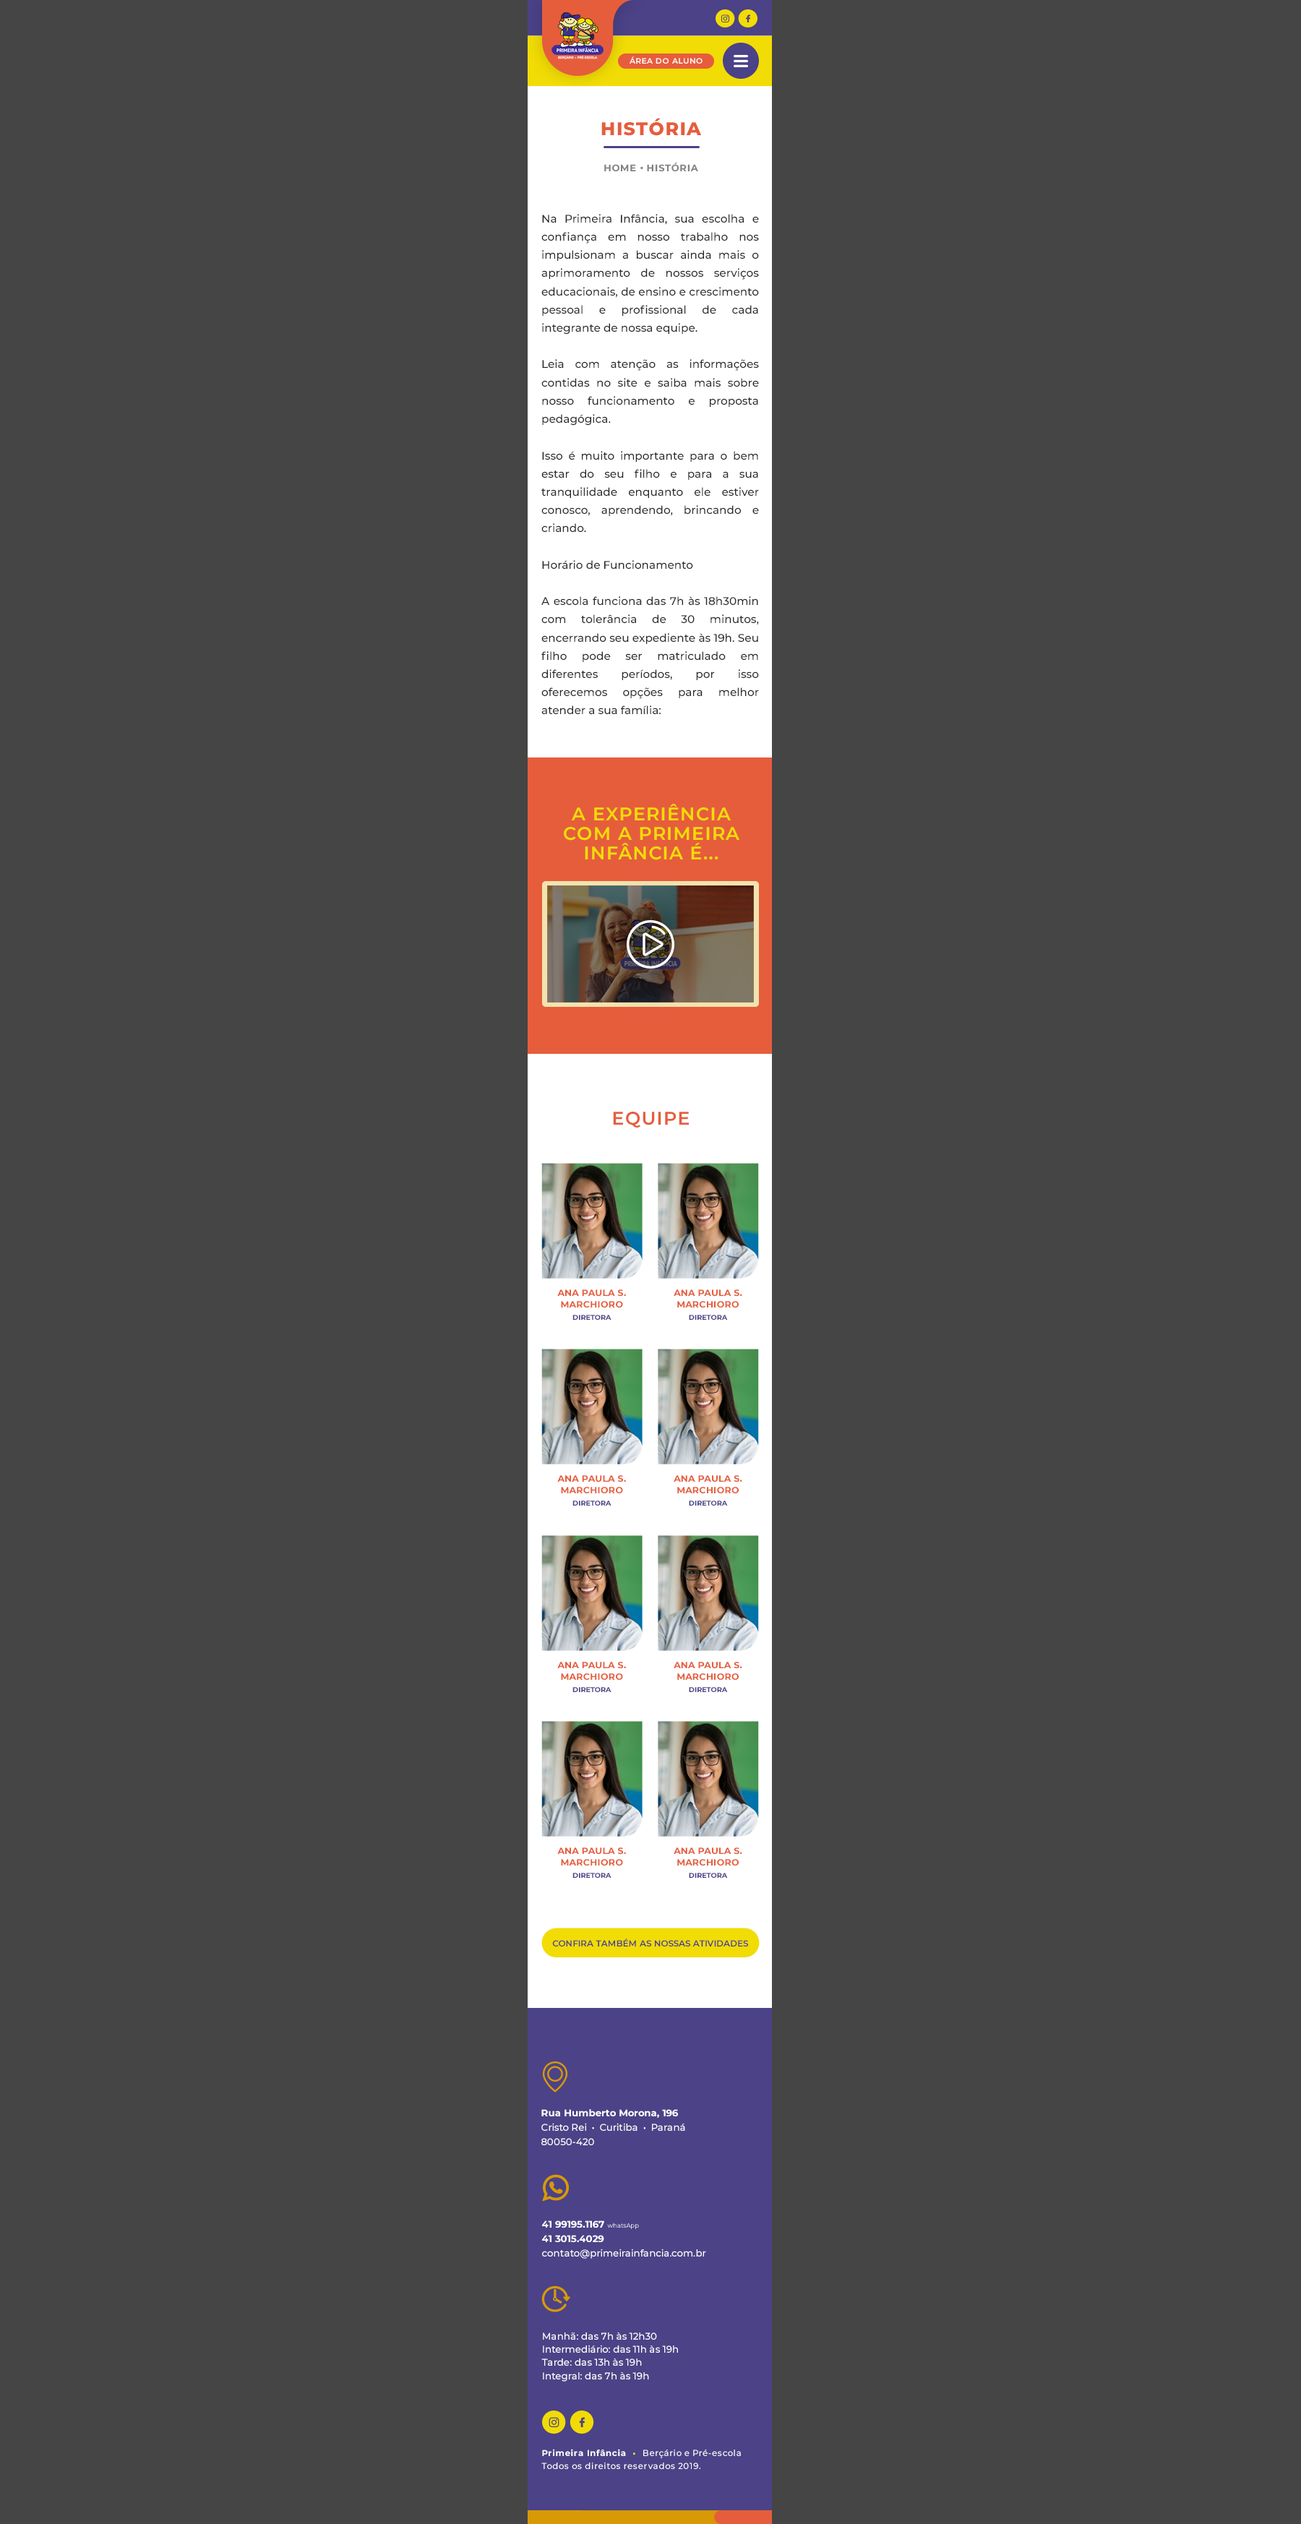
<style>
.page{position:relative;width:1301px;height:2524px;background:#454545}
.page>*{position:absolute;margin:0}
.t1{font:7.5px "Montserrat-SemiBold";letter-spacing:0.055em;color:#ffffff;text-transform:uppercase;scale:1.03 1}
.t2{font:18.2px "Montserrat-ExtraBold";letter-spacing:0.05em;color:#e65d3c;text-transform:uppercase}
.t3{font:9.4px "Montserrat-Bold";letter-spacing:0.05em;color:#818181;text-transform:uppercase}
.t4{font:11.1px/18.2px "Montserrat-Medium";color:#282828}
.t5{font:18.2px/19.5px "Montserrat-SemiBold";letter-spacing:0.05em;color:#f2dc05;text-transform:uppercase}
.t6{font:18.2px "Montserrat-SemiBold";letter-spacing:0.05em;color:#e65d3c;text-transform:uppercase}
.t7{font:9px/11px "Montserrat-Bold";letter-spacing:0.015em;color:#e65d3c;text-transform:uppercase}
.t8{font:7px/12.5px "Montserrat-Bold";letter-spacing:0.015em;color:#4b4287;text-transform:uppercase}
.t9{font:8.7px "Montserrat-SemiBold";color:#4b4287}
.t10{font:9.6px/14.5px "Montserrat-Medium";color:#ffffff}
.t11{font:9.6px/14.5px "Montserrat-Bold";color:#ffffff}
.t12{font:9.6px/14.4px "Montserrat-Medium";color:#ffffff}
.t13{font:9.6px/14.4px "Montserrat-Bold";color:#ffffff}
.t14{font:6px/14.4px "Montserrat-Regular";color:#ffffff}
.t15{font:9.6px/13.2px "Montserrat-Medium";color:#ffffff}
.t16{font:8.6px/13px "Montserrat-Medium";letter-spacing:0.055em;color:#ffffff}
.t17{font:8.6px/13px "Montserrat-Bold";letter-spacing:0.055em;color:#ffffff}
.t18{font:8.6px/13px "Montserrat-Bold";letter-spacing:0.055em;color:#f2dc05}
</style>
<div class="page">
<p class="t1" style="left:629px;top:56px;width:73px;height:8px">Área do aluno</p>
<p class="t2" style="left:601px;top:118px;width:101px;height:18px">HISTÓRIA</p>
<p class="t3" style="left:604px;top:163px;width:94px;height:9px">hOME • HISTÓRIA</p>
<p class="t4" style="left:541px;top:214px;width:218px;height:500px;text-align:justify">Na Primeira Infância, sua escolha e confiança em nosso trabalho nos impulsionam a buscar ainda mais o aprimoramento de nossos serviços educacionais, de ensino e crescimento pessoal e profissional de cada integrante de nossa equipe.<br><br>Leia com atenção as informações contidas no site e saiba mais sobre nosso funcionamento e proposta pedagógica.<br><br>Isso é muito importante para o bem estar do seu filho e para a sua tranquilidade enquanto ele estiver conosco, aprendendo, brincando e criando.<br><br>Horário de Funcionamento<br><br>A escola funciona das 7h às 18h30min com tolerância de 30 minutos, encerrando seu expediente às 19h. Seu filho pode ser matriculado em diferentes períodos, por isso oferecemos opções para melhor atender a sua família:<br><br>Manhã: das 7h às 13h;<br>Intermediário: das 11h às 19h;<br>Tarde: das 13h às 19h;<br>Integral: das 7h às 19h;</p>
<p class="t5" style="left:564px;top:804px;width:175px;height:56px;text-align:center">A experiência<br>com a Primeira<br>Infância é...</p>
<p class="t6" style="left:613px;top:1112px;width:76px;height:15px">Equipe</p>
<p class="t7" style="left:557px;top:1289px;width:69px;height:31px;text-align:center">Ana Paula S.<br>Marchioro<br><span class="t8">Diretora</span></p>
<p class="t7" style="left:674px;top:1289px;width:68px;height:31px;text-align:center">Ana Paula S.<br>Marchioro<br><span class="t8">Diretora</span></p>
<p class="t7" style="left:557px;top:1475px;width:69px;height:30px;text-align:center">Ana Paula S.<br>Marchioro<br><span class="t8">Diretora</span></p>
<p class="t7" style="left:674px;top:1475px;width:68px;height:30px;text-align:center">Ana Paula S.<br>Marchioro<br><span class="t8">Diretora</span></p>
<p class="t7" style="left:557px;top:1662px;width:69px;height:30px;text-align:center">Ana Paula S.<br>Marchioro<br><span class="t8">Diretora</span></p>
<p class="t7" style="left:674px;top:1662px;width:68px;height:30px;text-align:center">Ana Paula S.<br>Marchioro<br><span class="t8">Diretora</span></p>
<p class="t7" style="left:557px;top:1847px;width:69px;height:31px;text-align:center">Ana Paula S.<br>Marchioro<br><span class="t8">Diretora</span></p>
<p class="t7" style="left:674px;top:1847px;width:68px;height:31px;text-align:center">Ana Paula S.<br>Marchioro<br><span class="t8">Diretora</span></p>
<p class="t9" style="left:552px;top:1938px;width:197px;height:8px">CONFIRA TAMBÉM AS NOSSAS ATIVIDADES</p>
<p class="t10" style="left:541px;top:2109px;width:144px;height:36px"><span class="t11">Rua Humberto Morona, 196<br></span>Cristo Rei  •  Curitiba  •  Paraná<br>80050-420</p>
<p class="t12" style="left:542px;top:2220px;width:164px;height:39px"><span class="t13">41 99195.1167 </span><span class="t14">whatsApp<br></span><span class="t13">41 3015.4029<br></span>contato@primeirainfancia.com.br</p>
<p class="t15" style="left:541px;top:2332px;width:137px;height:49px">Manhã: das 7h às 12h30<br>Intermediário: das 11h às 19h<br>Tarde: das 13h às 19h<br>Integral: das 7h às 19h</p>
<p class="t16" style="left:541px;top:2449px;width:200px;height:20px"><span class="t17">Primeira Infância  </span><span class="t18">•  </span>Berçário e Pré-escola<br>Todos os direitos reservados 2019.</p>
</div>
